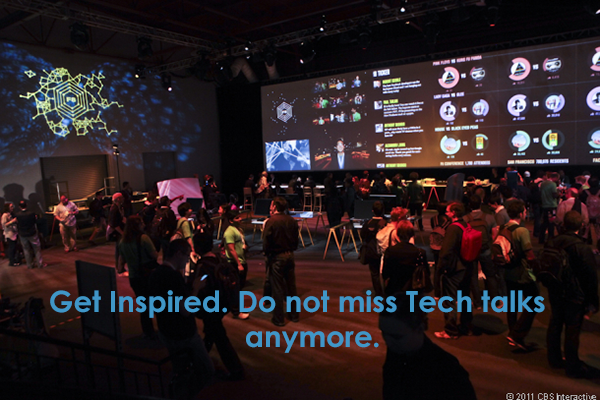
<style>
.page{position:relative;width:600px;height:400px}
.page>*{position:absolute;margin:0}
.t1{font:29.2px "CenturyGothic-Bold";color:#4096c7}
</style>
<div class="page">
<p class="t1" style="left:50px;top:290px;width:495px;height:63px">Get Inspired. Do not miss Tech talks <br>                        anymore.</p>
</div>
